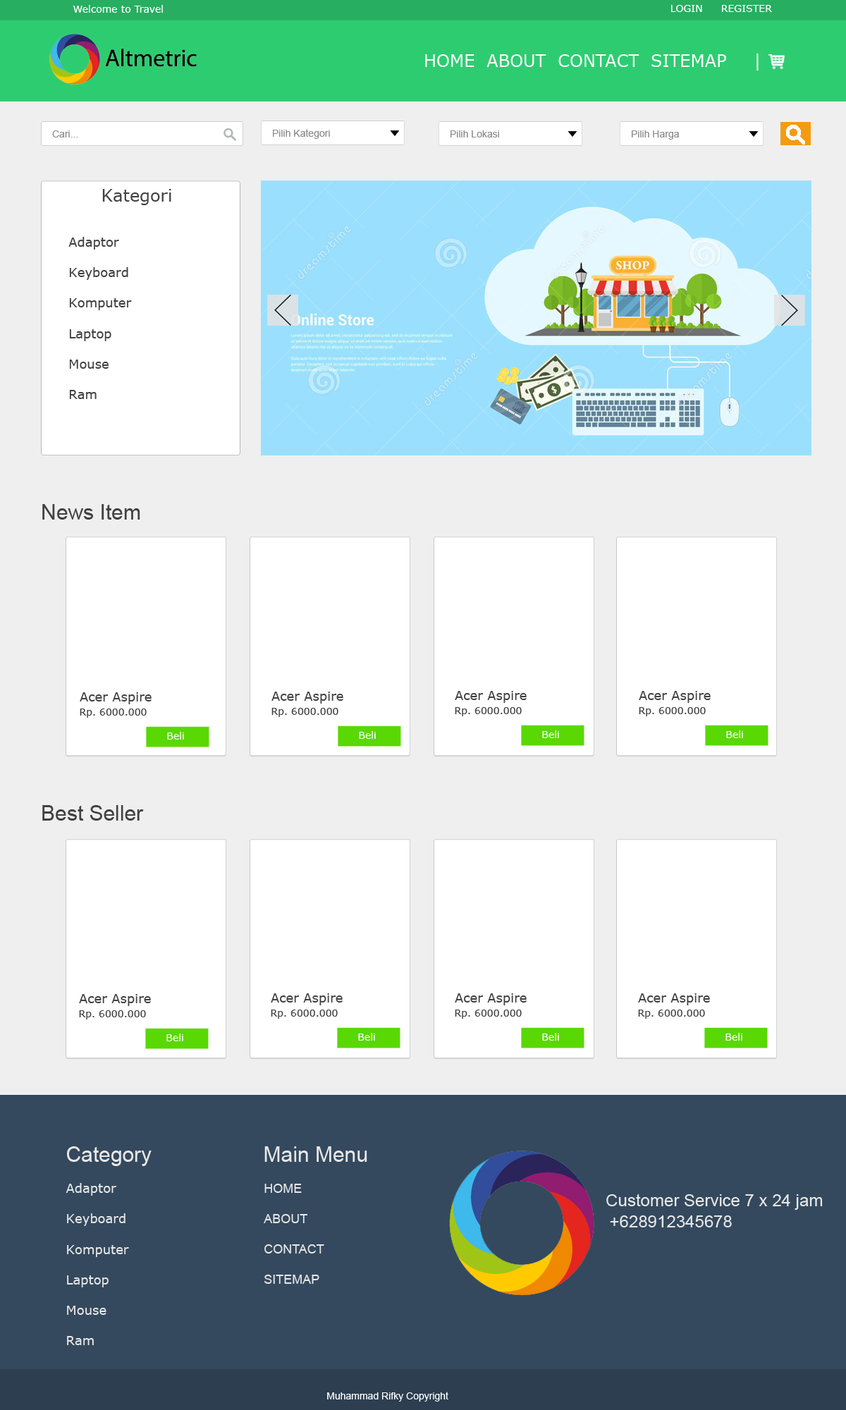
<style>
.page{position:relative;width:846px;height:1410px;background:#ffffff}
.page>*{position:absolute;margin:0}
.t1{font:9.9px "Verdana";color:#ffffff}
.t2{font:16.9px "Verdana";color:#ffffff}
.t3{font:9.9px "ArialMT";color:#8c8c8c}
.t4{font:16.9px "Verdana";color:#414141}
.t5{font:12.7px "Verdana";color:#414141}
.t6{font:21.1px "ArialMT";color:#414141}
.t7{font:9.9px "Verdana";color:#414141}
.t8{font:21.1px "ArialMT";color:#e8e8e8}
.t9{font:12.7px "Verdana";color:#e8e8e8}
.t10{font:12.7px "ArialMT";color:#e8e8e8}
.t11{font:16.9px "ArialMT";color:#e8e8e8}
.t12{font:9.9px "ArialMT";color:#ffffff}
</style>
<div class="page">
<p class="t1" style="left:73px;top:5px;width:90px;height:8px">Welcome to Travel</p>
<p class="t1" style="left:671px;top:5px;width:101px;height:7px">LOGIN  REGISTER</p>
<p class="t2" style="left:425px;top:54px;width:333px;height:16px">HOME  ABOUT  CONTACT  SITEMAP  |</p>
<p class="t3" style="left:52px;top:130px;width:26px;height:7px">Cari...</p>
<p class="t3" style="left:273px;top:129px;width:57px;height:10px">Pilih Kategori</p>
<p class="t3" style="left:450px;top:130px;width:49px;height:7px">Pilih Lokasi</p>
<p class="t3" style="left:632px;top:130px;width:47px;height:10px">Pilih Harga</p>
<p class="t4" style="left:102px;top:189px;width:69px;height:16px">Kategori</p>
<p class="t5" style="left:68px;top:237px;width:64px;height:162px">Adaptor<br><br>Keyboard<br><br>Komputer<br><br>Laptop<br><br>Mouse<br><br>Ram</p>
<p class="t6" style="left:42px;top:504px;width:98px;height:15px">News Item</p>
<p class="t5" style="left:80px;top:692px;width:72px;height:12px">Acer Aspire</p>
<p class="t5" style="left:271px;top:691px;width:72px;height:12px">Acer Aspire</p>
<p class="t5" style="left:455px;top:691px;width:72px;height:12px">Acer Aspire</p>
<p class="t5" style="left:639px;top:691px;width:72px;height:12px">Acer Aspire</p>
<p class="t7" style="left:80px;top:708px;width:67px;height:10px">Rp. 6000.000</p>
<p class="t7" style="left:271px;top:708px;width:67px;height:9px">Rp. 6000.000</p>
<p class="t7" style="left:455px;top:707px;width:67px;height:9px">Rp. 6000.000</p>
<p class="t7" style="left:639px;top:707px;width:67px;height:9px">Rp. 6000.000</p>
<p class="t1" style="left:167px;top:732px;width:17px;height:7px">Beli</p>
<p class="t1" style="left:359px;top:731px;width:17px;height:8px">Beli</p>
<p class="t1" style="left:542px;top:730px;width:17px;height:8px">Beli</p>
<p class="t1" style="left:726px;top:730px;width:17px;height:8px">Beli</p>
<p class="t6" style="left:42px;top:805px;width:102px;height:15px">Best Seller</p>
<p class="t5" style="left:79px;top:994px;width:72px;height:12px">Acer Aspire</p>
<p class="t5" style="left:271px;top:993px;width:72px;height:12px">Acer Aspire</p>
<p class="t5" style="left:455px;top:993px;width:72px;height:12px">Acer Aspire</p>
<p class="t5" style="left:638px;top:993px;width:72px;height:12px">Acer Aspire</p>
<p class="t7" style="left:79px;top:1010px;width:67px;height:9px">Rp. 6000.000</p>
<p class="t7" style="left:271px;top:1009px;width:67px;height:10px">Rp. 6000.000</p>
<p class="t7" style="left:455px;top:1009px;width:67px;height:10px">Rp. 6000.000</p>
<p class="t7" style="left:638px;top:1009px;width:67px;height:10px">Rp. 6000.000</p>
<p class="t1" style="left:166px;top:1033px;width:17px;height:8px">Beli</p>
<p class="t1" style="left:358px;top:1033px;width:17px;height:7px">Beli</p>
<p class="t1" style="left:542px;top:1033px;width:17px;height:7px">Beli</p>
<p class="t1" style="left:725px;top:1033px;width:17px;height:7px">Beli</p>
<p class="t8" style="left:67px;top:1146px;width:85px;height:20px">Category</p>
<p class="t8" style="left:264px;top:1146px;width:103px;height:16px">Main Menu</p>
<p class="t9" style="left:66px;top:1183px;width:63px;height:162px">Adaptor<br><br>Keyboard<br><br>Komputer<br><br>Laptop<br><br>Mouse<br><br>Ram</p>
<p class="t10" style="left:264px;top:1183px;width:60px;height:101px">HOME<br><br>ABOUT<br><br>CONTACT<br><br>SITEMAP</p>
<p class="t11" style="left:606px;top:1193px;width:217px;height:17px">Customer Service 7 x 24 jam</p>
<p class="t11" style="left:610px;top:1215px;width:122px;height:12px">+628912345678</p>
<p class="t12" style="left:327px;top:1391px;width:121px;height:10px">Muhammad Rifky Copyright</p>
</div>
